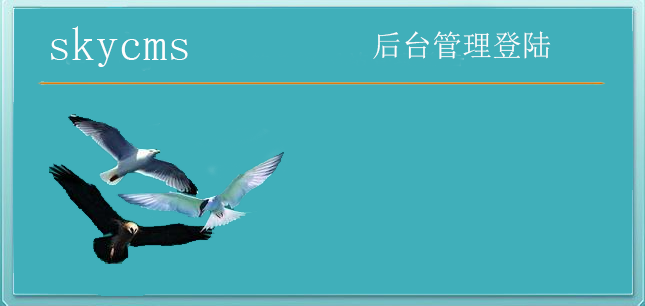
<style>
.page{position:relative;width:645px;height:306px;background:#40afba}
.page>*{position:absolute;margin:0}
.t1{font:48px "SimSun";color:#fdfdfd}
.t2{font:30px "SimSun";color:#fdfdfd}
</style>
<div class="page">
<p class="t1" style="left:51px;top:26px;width:137px;height:41px">skycms</p>
<p class="t2" style="left:373px;top:31px;width:178px;height:28px">后台管理登陆</p>
</div>
